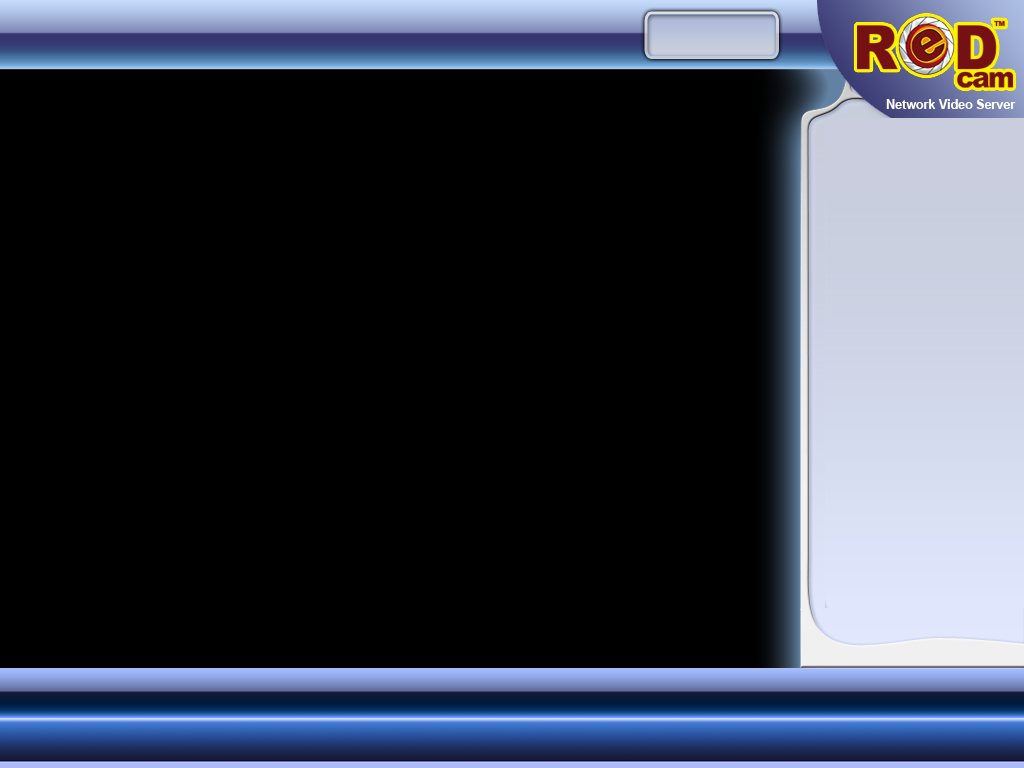
<style>
.page{position:relative;width:1024px;height:768px;background:#000000}
.page>*{position:absolute;margin:0}
.t1{font:12.5px "Arial-BoldMT";color:#ffffff}
</style>
<div class="page">
<p class="t1" style="left:886px;top:99px;width:130px;height:10px">Network Video Server</p>
</div>
